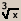
<style>
.page{position:relative;width:21px;height:21px;background:#d9cdc1}
.page>*{position:absolute;margin:0}
.t1{font:9px "Tahoma";color:#000000}
</style>
<div class="page">
<p class="t1" style="left:2px;top:2px;width:5px;height:8px">3</p>
<p class="t1" style="left:13px;top:13px;width:5px;height:5px">x</p>
</div>
